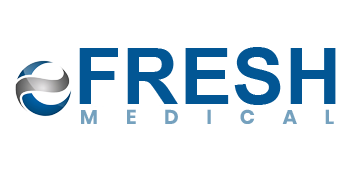
<style>
.page{position:relative;width:350px;height:192px;background:#ffffff}
.page>*{position:absolute;margin:0}
.t1{font:78px "Arial-BoldMT";letter-spacing:0.01em;color:#025694}
</style>
<div class="page">
<p class="t1" style="left:79px;top:47px;width:257px;height:58px">FRESH</p>
</div>
